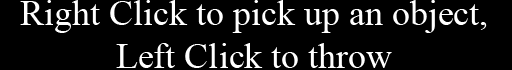
<style>
.page{position:relative;width:512px;height:70px;background:#000000}
.page>*{position:absolute;margin:0}
.t1{font:36px "TimesNewRomanPSMT";color:#ffffff}
</style>
<div class="page">
<p class="t1" style="left:20px;top:0px;width:467px;height:68px;text-align:center">Right Click to pick up an object,<br>Left Click to throw</p>
</div>
